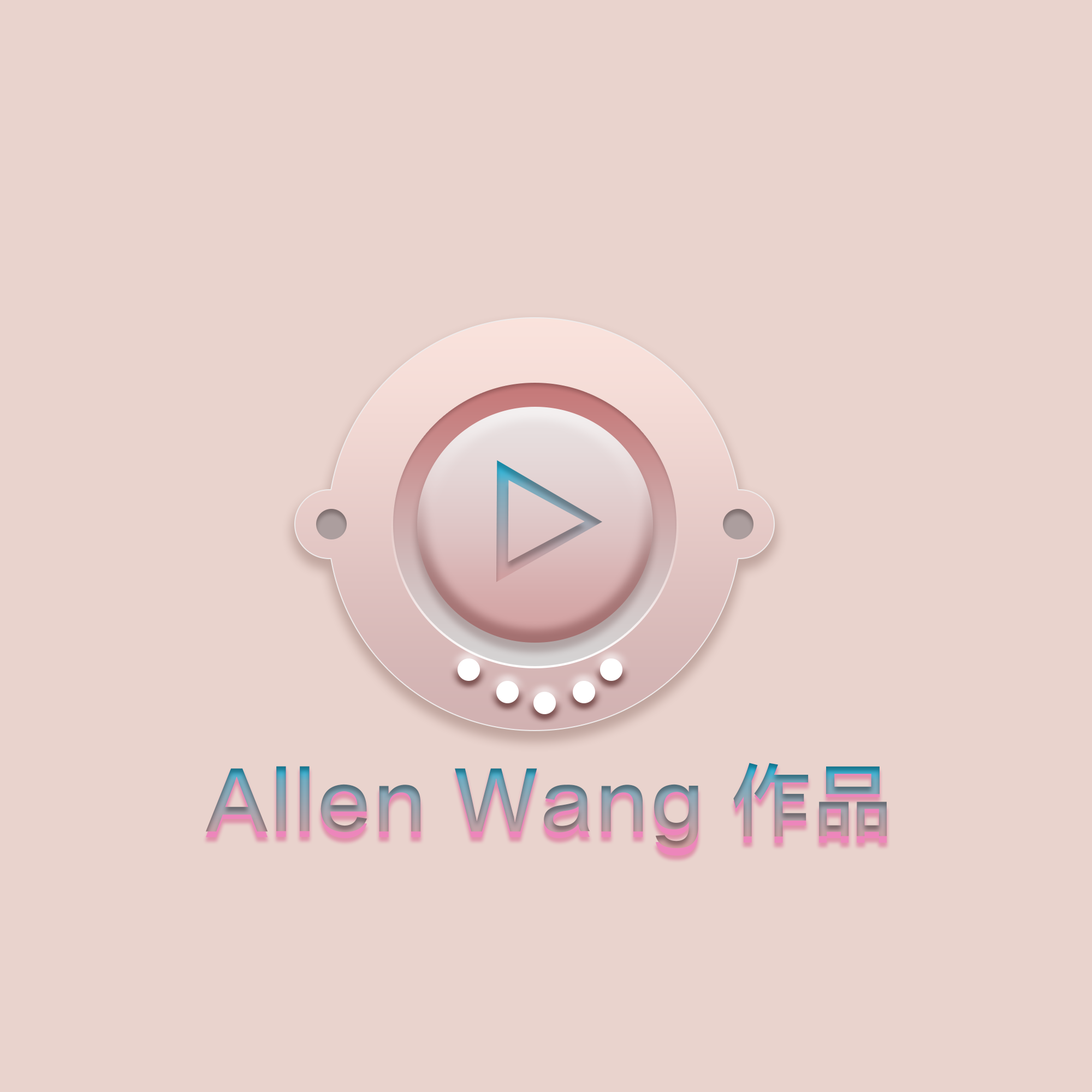
<style>
.page{position:relative;width:1092px;height:1092px;background:#e9d3cd}
.page>*{position:absolute;margin:0}
.t1{font:85px "FZLTZHK--GBK1-0";letter-spacing:0.04em;scale:0.93 1}
.t2{font:78.6px "FZLTZHK--GBK1-0";letter-spacing:0.04em}
</style>
<div class="page">
<p class="t1" style="left:206px;top:763px;width:681px;height:93px">Allen Wang 作品</p>
<p class="t2" style="left:206px;top:763px;width:681px;height:85px">Allen Wang 作品</p>
</div>
